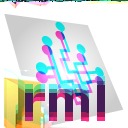
<style>
.page{position:relative;width:128px;height:128px;background:#ffffff}
.page>*{position:absolute;margin:0}
.t1{font:48px "Silom"}
</style>
<div class="page">
<p class="t1" style="left:25px;top:75px;width:80px;height:36px">rml</p>
</div>
